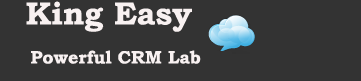
<style>
.page{position:relative;width:361px;height:81px;background:#333333}
.page>*{position:absolute;margin:0}
.t1{font:32px "BookmanOldStyle-Bold";color:#f8f1f1}
.t2{font:18px "BookmanOldStyle-Bold";color:#f8f1f1}
</style>
<div class="page">
<p class="t1" style="left:26px;top:1px;width:166px;height:31px">King Easy</p>
<p class="t2" style="left:31px;top:50px;width:170px;height:14px">Powerful CRM Lab</p>
</div>
